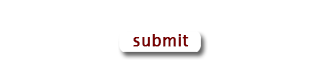
<style>
.page{position:relative;width:320px;height:81px;background:#ffffff}
.page>*{position:absolute;margin:0}
.t1{font:16px "LucidaGrande";color:#790000;font-weight:bold}
</style>
<div class="page">
<p class="t1" style="left:133px;top:34px;width:56px;height:13px">submit</p>
</div>
